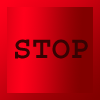
<style>
.page{position:relative;width:100px;height:100px}
.page>*{position:absolute;margin:0}
.t1{font:32px "Courier-Bold";color:#370303}
</style>
<div class="page">
<p class="t1" style="left:15px;top:39px;width:73px;height:20px">STOP</p>
</div>
